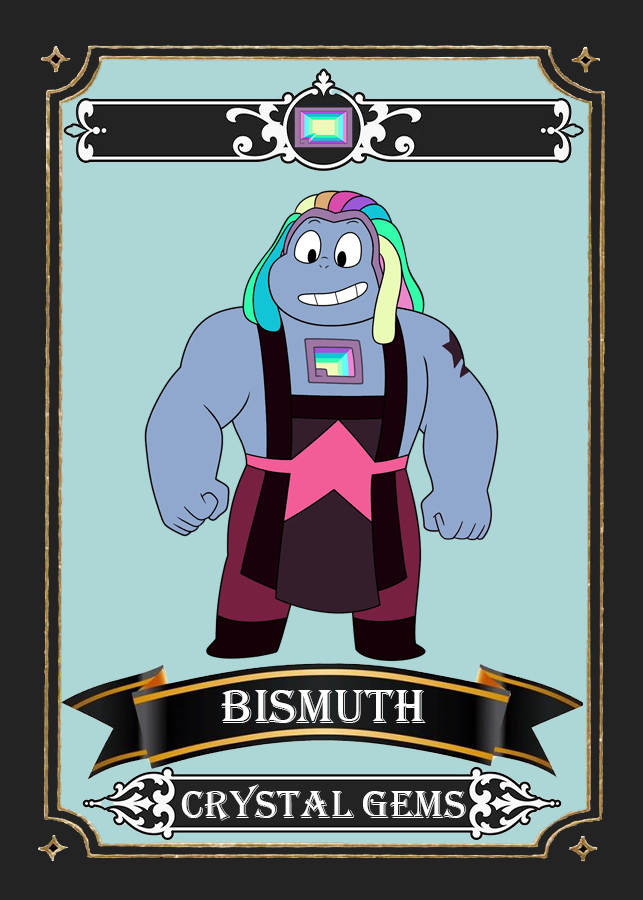
<style>
.page{position:relative;width:643px;height:900px;background:#add7d6}
.page>*{position:absolute;margin:0}
.t1{font:50.5px "Algerian";color:#ffffff}
.t2{font:39.9px "Algerian";color:#ffffff}
</style>
<div class="page">
<p class="t1" style="left:221px;top:690px;width:205px;height:33px">Bismuth</p>
<p class="t2" style="left:181px;top:784px;width:285px;height:37px">Crystal Gems</p>
</div>
